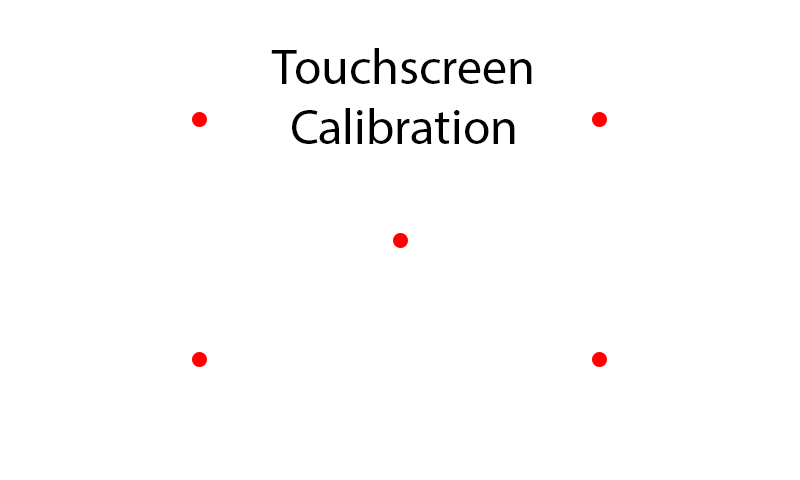
<style>
.page{position:relative;width:800px;height:480px;background:#ffffff}
.page>*{position:absolute;margin:0}
.t1{font:50px "MyriadPro-Regular";color:#000000}
</style>
<div class="page">
<p class="t1" style="left:271px;top:48px;width:261px;height:96px;text-align:center">Touchscreen<br>Calibration</p>
</div>
